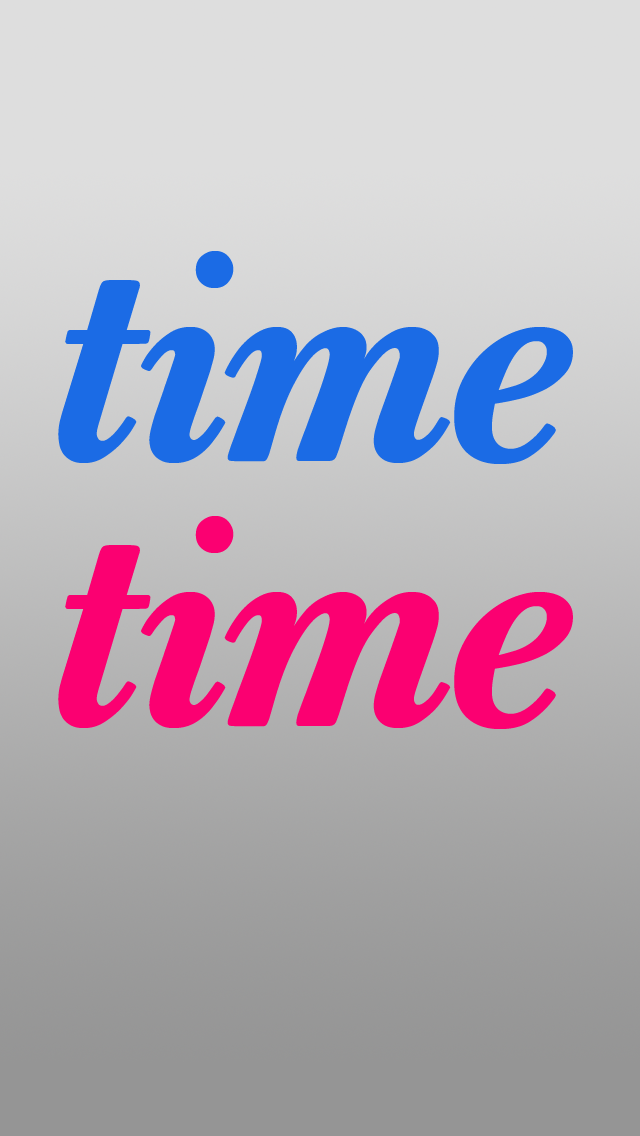
<style>
.page{position:relative;width:640px;height:1136px}
.page>*{position:absolute;margin:0}
.t1{font:300px "BaskervilleBook-MedItalic";color:#1b6be5}
.t2{font:300px "BaskervilleBook-MedItalic";color:#fb0071}
</style>
<div class="page">
<p class="t1" style="left:58px;top:251px;width:515px;height:213px">time</p>
<p class="t2" style="left:58px;top:516px;width:515px;height:213px">time</p>
</div>
